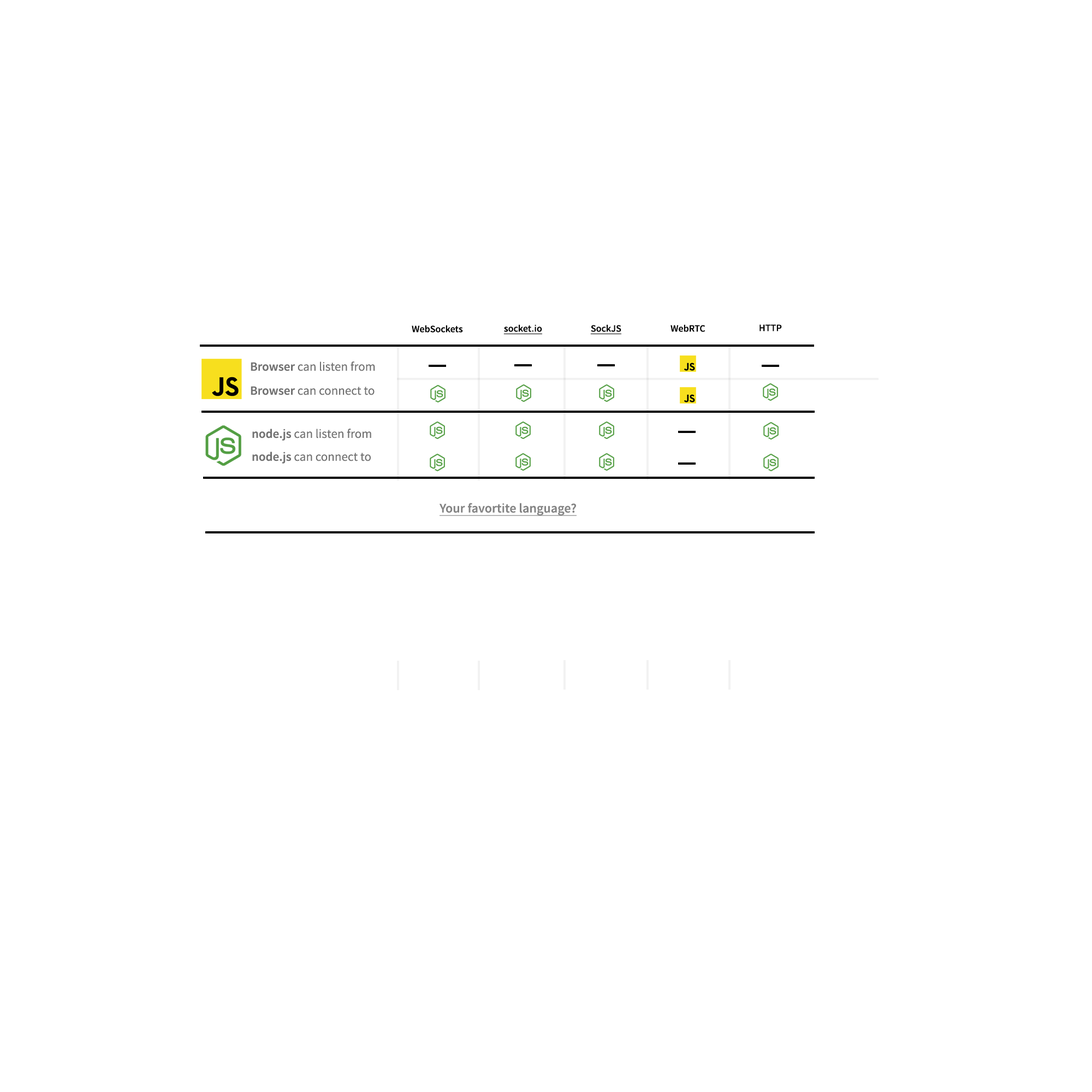
<style>
.page{position:relative;width:1092px;height:1092px;background:#ffffff}
.page>*{position:absolute;margin:0}
.t1{font:9.8px "SourceSansPro-Semibold";color:#000000}
.t2{font:9.8px "SourceSansPro-Semibold";color:#000000;text-decoration:underline}
.t3{font:12.6px "SourceSansPro-Regular";color:#717171}
.t4{font:12.6px "SourceSansPro-Semibold";color:#717171}
.t5{font:13.1px "SourceSansPro-Semibold";color:#848484;text-decoration:underline}
</style>
<div class="page">
<p class="t1" style="left:412px;top:325px;width:51px;height:8px">WebSockets</p>
<p class="t2" style="left:503px;top:324px;width:39px;height:10px">socket.io</p>
<p class="t2" style="left:590px;top:324px;width:31px;height:10px">SockJS</p>
<p class="t1" style="left:670px;top:324px;width:35px;height:8px">WebRTC</p>
<p class="t1" style="left:759px;top:324px;width:23px;height:7px">HTTP</p>
<p class="t3" style="left:251px;top:361px;width:124px;height:10px"><span class="t4">Browser </span>can listen from</p>
<p class="t3" style="left:251px;top:386px;width:124px;height:9px"><span class="t4">Browser</span> can connect to</p>
<p class="t3" style="left:252px;top:429px;width:119px;height:12px"><span class="t4">node.js</span> can listen from</p>
<p class="t3" style="left:252px;top:452px;width:119px;height:12px"><span class="t4">node.js</span> can connect to</p>
<p class="t5" style="left:440px;top:503px;width:137px;height:13px">Your favortite language?</p>
</div>
